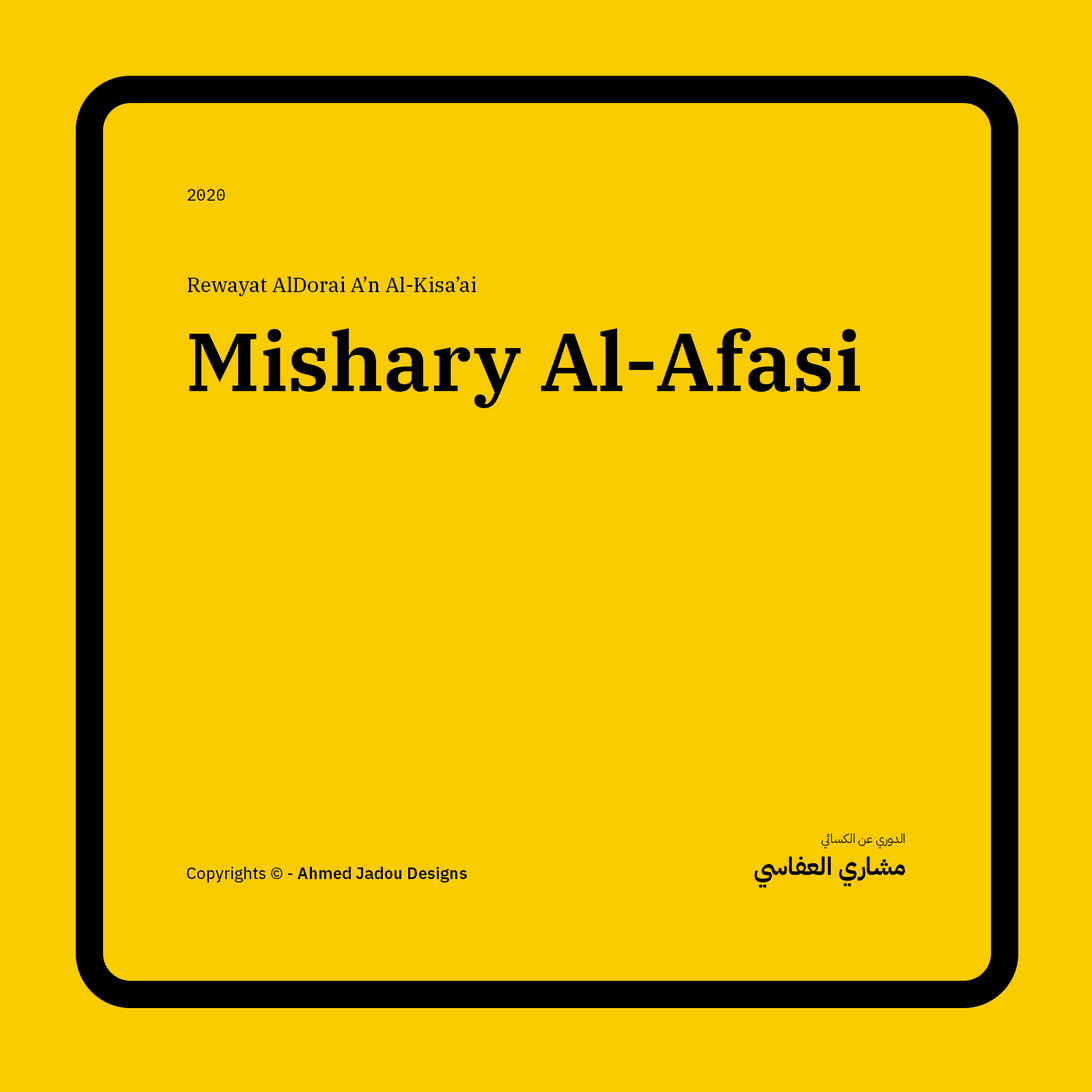
<style>
.page{position:relative;width:1092px;height:1092px;background:#facb00}
.page>*{position:absolute;margin:0}
.t1{font:16.4px "IBMPlexMono-Text";color:#000000}
.t2{font:20.5px "IBMPlexSerif-Text";color:#000000}
.t3{font:81.9px "IBMPlexSerif-SemiBold";color:#000000}
.t4{font:12.3px "IBMPlexArabic-Light";color:#000000}
.t5{font:24.6px "IBMPlexArabic-Bold";color:#000000}
.t6{font:16.4px "IBMPlexSans-SemiBold";color:#000000}
.t7{font:16.4px "IBMPlexSans-Text";color:#000000}
</style>
<div class="page">
<p class="t1" style="left:188px;top:189px;width:37px;height:12px">2020</p>
<p class="t2" style="left:187px;top:276px;width:289px;height:20px">Rewayat AlDorai A’n Al-Kisa’ai</p>
<p class="t3" style="left:189px;top:328px;width:672px;height:80px">Mishary Al-Afasi</p>
<p class="t4" style="left:821px;top:833px;width:84px;height:15px">الدوري عن الكسائي</p>
<p class="t5" style="left:754px;top:857px;width:151px;height:31px">مشاري العفاسي</p>
<p class="t6" style="left:187px;top:867px;width:280px;height:15px"><span class="t7">Copyrights © - </span>Ahmed Jadou Designs</p>
</div>
